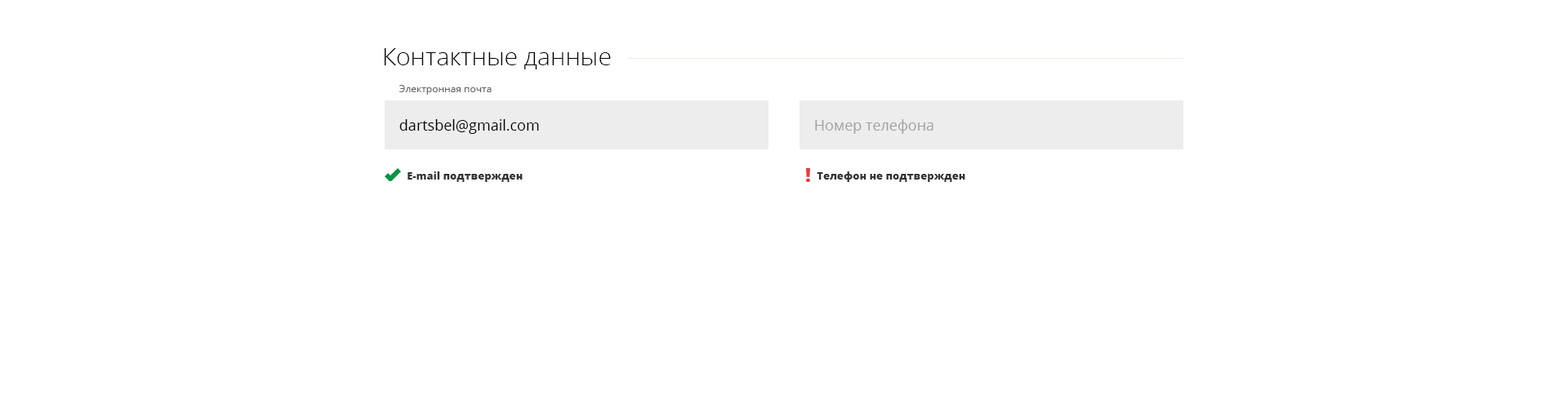
<style>
.page{position:relative;width:1568px;height:413px;background:#ffffff}
.page>*{position:absolute;margin:0}
.t1{font:24.5px "OpenSans-Light";color:#000000}
.t2{font:9.8px "OpenSans";color:#666666}
.t3{font:14.7px "OpenSans";color:#000000}
.t4{font:14.7px "OpenSans";color:#a1a1a1}
.t5{font:10.6px "OpenSans-Extrabold";color:#333333}
</style>
<div class="page">
<p class="t1" style="left:384px;top:48px;width:227px;height:21px">Контактные данные</p>
<p class="t1" style="left:384px;top:48px;width:227px;height:21px">Контактные данные</p>
<p class="t1" style="left:384px;top:48px;width:227px;height:21px">Контактные данные</p>
<p class="t2" style="left:399px;top:85px;width:93px;height:10px">Электронная почта</p>
<p class="t2" style="left:399px;top:85px;width:93px;height:10px">Электронная почта</p>
<p class="t2" style="left:399px;top:85px;width:93px;height:10px">Электронная почта</p>
<p class="t2" style="left:399px;top:85px;width:93px;height:10px">Электронная почта</p>
<p class="t3" style="left:399px;top:119px;width:140px;height:15px">dartsbel@gmail.com</p>
<p class="t3" style="left:399px;top:119px;width:140px;height:15px">dartsbel@gmail.com</p>
<p class="t3" style="left:399px;top:119px;width:140px;height:15px">dartsbel@gmail.com</p>
<p class="t3" style="left:399px;top:119px;width:140px;height:15px">dartsbel@gmail.com</p>
<p class="t4" style="left:815px;top:119px;width:118px;height:15px">Номер телефона</p>
<p class="t5" style="left:408px;top:172px;width:115px;height:10px">E-mail подтвержден</p>
<p class="t5" style="left:408px;top:172px;width:115px;height:10px">E-mail подтвержден</p>
<p class="t5" style="left:408px;top:172px;width:115px;height:10px">E-mail подтвержден</p>
<p class="t5" style="left:408px;top:172px;width:115px;height:10px">E-mail подтвержден</p>
<p class="t5" style="left:817px;top:172px;width:148px;height:10px">Телефон не подтвержден</p>
<p class="t5" style="left:817px;top:172px;width:148px;height:10px">Телефон не подтвержден</p>
<p class="t5" style="left:817px;top:172px;width:148px;height:10px">Телефон не подтвержден</p>
</div>
